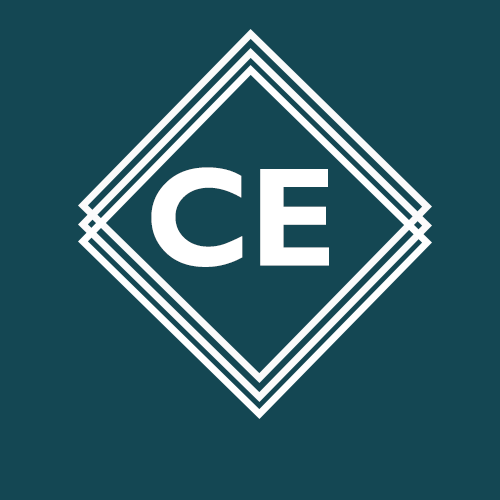
<style>
.page{position:relative;width:500px;height:500px;background:#144753}
.page>*{position:absolute;margin:0}
.t1{font:141.1px "GillSansMT-Bold";color:#ffffff;scale:0.96 1}
</style>
<div class="page">
<p class="t1" style="left:151px;top:167px;width:178px;height:100px">CE</p>
</div>
